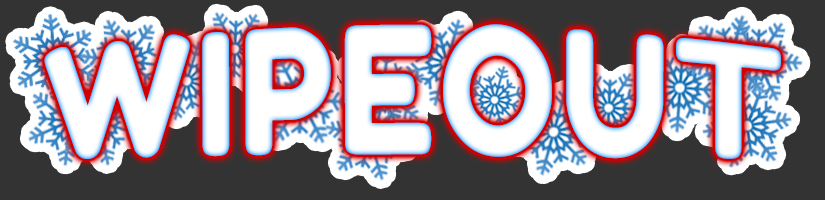
<style>
.page{position:relative;width:825px;height:200px;background:#333333}
.page>*{position:absolute;margin:0}
.t1{font:150px "FredokaOne-Regular";letter-spacing:0.03em;color:#ffffff;text-transform:uppercase}
</style>
<div class="page">
<p class="t1" style="left:44px;top:24px;width:737px;height:135px">WIPEOUT</p>
</div>
